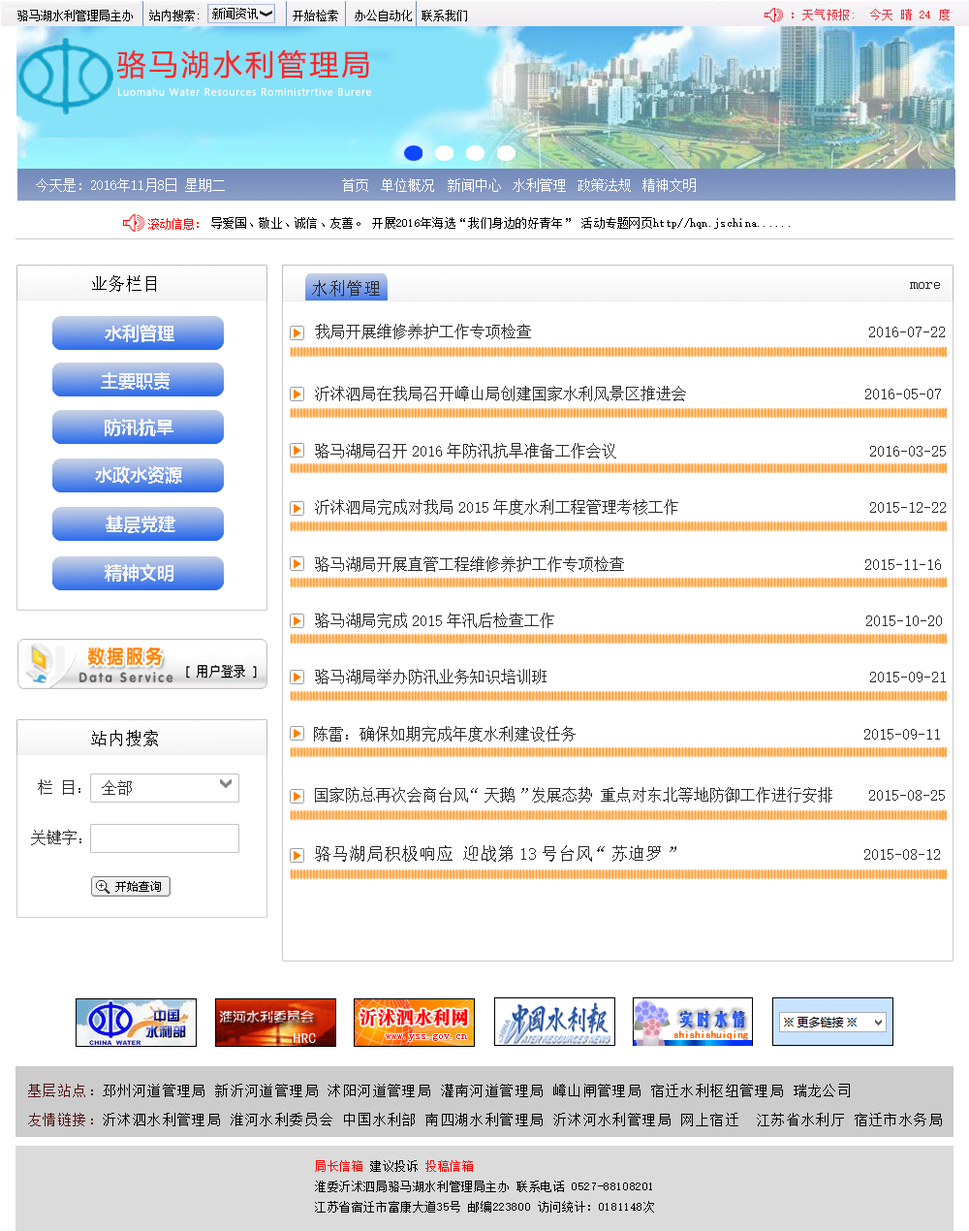
<style>
.page{position:relative;width:969px;height:1231px;background:#ffffff}
.page>*{position:absolute;margin:0}
.t1{font:11.6px "SimSun";color:#000000}
.t2{font:11.6px "SimSun";color:#010101}
.t3{font:11.6px "SimSun";letter-spacing:0.05em;color:#e92b3a}
.t4{font:29.1px "MicrosoftYaHei";letter-spacing:0.1em;color:#f12020}
.t5{font:9.7px "MicrosoftYaHeiLight";letter-spacing:0.07em;color:#ffffff;font-weight:bold}
.t6{font:13.6px "SimSun";color:#ffffff}
.t7{font:11.6px "SimSun";color:#ff0000}
.t8{font:11.6px "SimSun";letter-spacing:0.025em;color:#010101}
.t9{font:17.4px "SimSun";color:#000000}
.t10{font:17.4px "SimSun";color:#2b2a2a}
.t11{font:15.5px "SimSun";color:#2b2a2a}
.t12{font:17.4px "MicrosoftYaHei-Bold";color:#f2f2f2}
.t13{font:13.6px/29.1px "SimSun";letter-spacing:0.1em;color:#000000}
.t14{font:13.6px/29.1px "SimSun";letter-spacing:0.1em;color:#531111}
.t15{font:11.6px "SimSun";letter-spacing:0.05em;color:#000000}
.t16{font:11.6px "SimSun";letter-spacing:0.05em;color:#ff0000}
.t17{font:11.6px/29.1px "SimSun";letter-spacing:-0.1em;color:#000000}
</style>
<div class="page">
<p class="t1" style="left:17px;top:10px;width:116px;height:11px">骆马湖水利管理局主办</p>
<p class="t1" style="left:149px;top:10px;width:50px;height:11px">站内搜索:</p>
<p class="t1" style="left:212px;top:8px;width:46px;height:11px">新闻资讯</p>
<p class="t2" style="left:293px;top:10px;width:45px;height:11px">开始检索</p>
<p class="t1" style="left:355px;top:10px;width:57px;height:11px">办公自动化</p>
<p class="t1" style="left:422px;top:10px;width:45px;height:11px">联系我们</p>
<p class="t3" style="left:792px;top:9px;width:158px;height:11px">：天气预报:  今天 晴 24 度</p>
<p class="t4" style="left:116px;top:49px;width:253px;height:30px">骆马湖水利管理局</p>
<p class="t5" style="left:118px;top:87px;width:253px;height:9px">Luomahu Water Resources Roministrrtive Burere</p>
<p class="t6" style="left:36px;top:178px;width:189px;height:14px">今天是: 2016年11月8日 星期二</p>
<p class="t6" style="left:342px;top:178px;width:26px;height:14px">首页</p>
<p class="t6" style="left:381px;top:178px;width:53px;height:14px">单位概况</p>
<p class="t6" style="left:448px;top:178px;width:53px;height:14px">新闻中心</p>
<p class="t6" style="left:513px;top:178px;width:53px;height:14px">水利管理</p>
<p class="t6" style="left:578px;top:178px;width:53px;height:14px">政策法规</p>
<p class="t6" style="left:642px;top:178px;width:54px;height:14px">精神文明</p>
<p class="t7" style="left:148px;top:218px;width:51px;height:12px">滚动信息：</p>
<p class="t8" style="left:211px;top:217px;width:579px;height:12px">导爱国、敬业、诚信、友善。 开展2016年海选“我们身边的好青年” 活动专题网页http//hqn.jschina......</p>
<p class="t9" style="left:92px;top:275px;width:64px;height:17px">业务栏目</p>
<p class="t10" style="left:312px;top:280px;width:68px;height:17px">水利管理</p>
<p class="t11" style="left:910px;top:282px;width:30px;height:7px">more</p>
<p class="t12" style="left:105px;top:325px;width:69px;height:17px">水利管理</p>
<p class="t11" style="left:315px;top:324px;width:630px;height:15px"><span class="t10"> </span>我局开展维修养护工作专项检查                                           2016-07-22</p>
<p class="t12" style="left:101px;top:372px;width:69px;height:18px">主要职责</p>
<p class="t11" style="left:315px;top:386px;width:626px;height:15px"><span class="t10"> </span>沂沭泗局在我局召开嶂山局创建国家水利风景区推进会                    2016-05-07</p>
<p class="t12" style="left:105px;top:419px;width:68px;height:17px">防汛抗旱</p>
<p class="t11" style="left:315px;top:443px;width:631px;height:15px">骆马湖局召开2016年防汛抗旱准备工作会议                                 2016-03-25</p>
<p class="t12" style="left:95px;top:466px;width:87px;height:18px">水政水资源</p>
<p class="t11" style="left:315px;top:499px;width:631px;height:16px">沂沭泗局完成对我局2015年度水利工程管理考核工作                        2015-12-22</p>
<p class="t12" style="left:106px;top:515px;width:69px;height:18px">基层党建</p>
<p class="t11" style="left:315px;top:556px;width:626px;height:16px"><span class="t10"> </span>骆马湖局开展直管工程维修养护工作专项检查                             2015-11-16</p>
<p class="t12" style="left:105px;top:564px;width:68px;height:17px">精神文明</p>
<p class="t11" style="left:315px;top:612px;width:627px;height:16px">骆马湖局完成2015年汛后检查工作                                     2015-10-20</p>
<p class="t11" style="left:315px;top:669px;width:631px;height:15px">骆马湖局举办防汛业务知识培训班                                          2015-09-21</p>
<p class="t11" style="left:314px;top:726px;width:626px;height:15px">陈雷：确保如期完成年度水利建设任务                                     2015-09-11</p>
<p class="t9" style="left:91px;top:730px;width:67px;height:16px">站内搜索</p>
<p class="t11" style="left:38px;top:779px;width:42px;height:16px">栏 目：</p>
<p class="t11" style="left:102px;top:780px;width:30px;height:16px">全部</p>
<p class="t11" style="left:315px;top:787px;width:630px;height:15px">国家防总再次会商台风“天鹅”发展态势 重点对东北等地防御工作进行安排    2015-08-25</p>
<p class="t11" style="left:31px;top:829px;width:50px;height:16px">关键字：</p>
<p class="t10" style="left:315px;top:845px;width:625px;height:16px">骆马湖局积极响应 迎战第13号台风“苏迪罗”                     <span class="t11">2015-08-12</span></p>
<p class="t13" style="left:28px;top:1083px;width:914px;height:43px"><span class="t14">基层站点：</span>邳州河道管理局 新沂河道管理局 沭阳河道管理局 灌南河道管理局 嶂山闸管理局 宿迁水利枢纽管理局 瑞龙公司<br><span class="t14">友情链接：</span>沂沭泗水利管理局 淮河水利委员会 中国水利部 南四湖水利管理局 沂沭河水利管理局 网上宿迁  江苏省水利厅 宿迁市水务局</p>
<p class="t15" style="left:315px;top:1160px;width:339px;height:52px"><span class="t16">局长信箱</span> 建议投诉 <span class="t16">投稿信箱<br></span>淮委沂沭泗局骆马湖水利管理局主办 联系电话 0527-88108201<br>江苏省宿迁市富康大道35号 邮编223800 访问统计：0181148<span class="t17">次</span></p>
</div>
